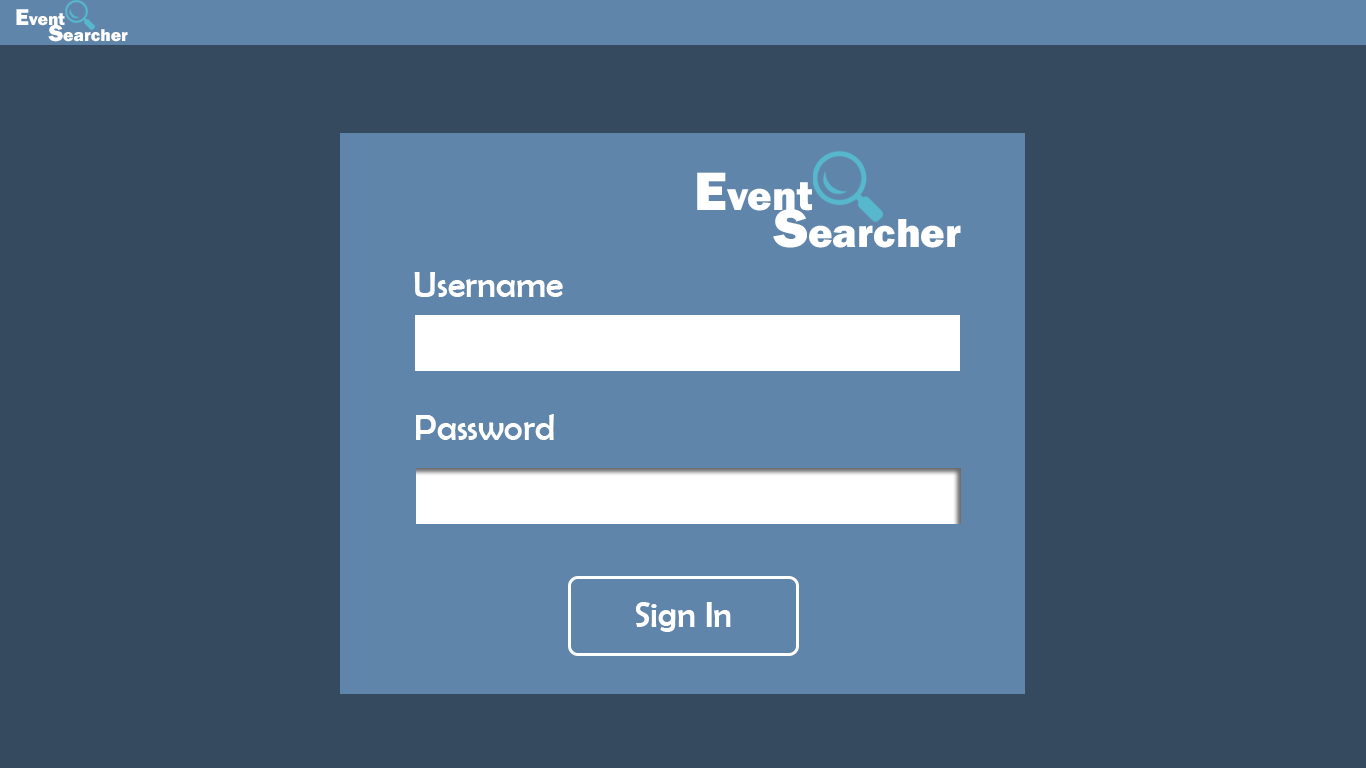
<style>
.page{position:relative;width:1366px;height:768px;background:#35495f}
.page>*{position:absolute;margin:0}
.t1{font:17.7px "FranklinGothic-Heavy";color:#ffffff}
.t2{font:23.6px "FranklinGothic-Heavy";color:#ffffff}
.t3{font:41.9px "FranklinGothic-Heavy";color:#ffffff}
.t4{font:55.9px "FranklinGothic-Heavy";color:#ffffff}
.t5{font:36px "BerlinSansFB-Reg";color:#ffffff}
</style>
<div class="page">
<p class="t1" style="left:16px;top:9px;width:49px;height:17px"><span class="t2">E</span>vent</p>
<p class="t1" style="left:48px;top:25px;width:80px;height:17px"><span class="t2">S</span>earcher</p>
<p class="t3" style="left:697px;top:172px;width:115px;height:39px"><span class="t4">E</span>vent</p>
<p class="t3" style="left:773px;top:209px;width:188px;height:39px"><span class="t4">S</span>earcher</p>
<p class="t5" style="left:414px;top:272px;width:149px;height:25px">Username</p>
<p class="t5" style="left:416px;top:414px;width:138px;height:26px">Password</p>
<p class="t5" style="left:636px;top:602px;width:95px;height:30px">Sign In</p>
</div>
